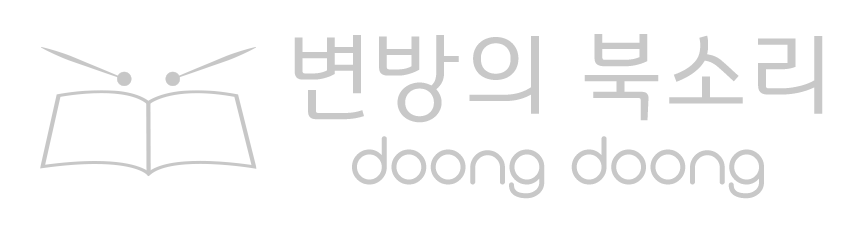
<style>
.page{position:relative;width:867px;height:225px;background:#ffffff}
.page>*{position:absolute;margin:0}
.t1{font:100px "GyeonggiTitleL";letter-spacing:0.025em;color:#c8c8c8}
.t2{font:68px "Monoglyceride";letter-spacing:0.025em;color:#c8c8c8}
</style>
<div class="page">
<p class="t1" style="left:294px;top:34px;width:529px;height:89px">변방의 북소리</p>
<p class="t2" style="left:352px;top:136px;width:412px;height:63px">doong doong</p>
</div>
